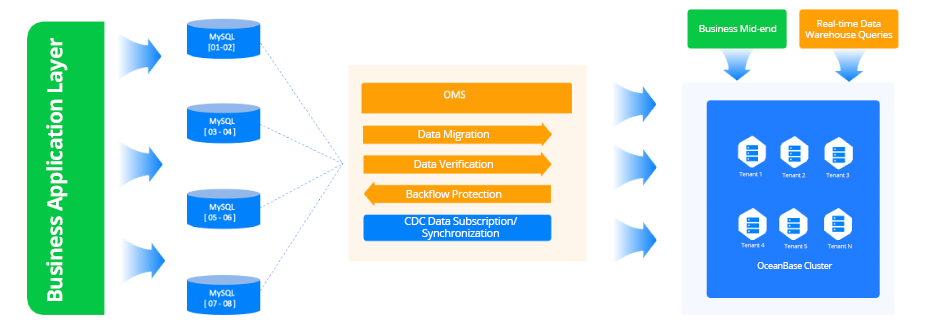
<style>
.page{position:relative;width:936px;height:324px;background:#ffffff}
.page>*{position:absolute;margin:0}
.t1{font:10px "OpenSans";letter-spacing:-0.03em;color:#ffffff}
.t2{font:10px/11px "OpenSans";letter-spacing:-0.03em;color:#ffffff}
.t3{font:21px "OpenSans-Bold";letter-spacing:-0.03em;color:#ffffff}
.t4{font:11px "OpenSans";letter-spacing:-0.03em;color:#ffffff}
.t5{font:6px "OpenSans";letter-spacing:-0.03em}
.t6{font:11px/12px "OpenSans";letter-spacing:-0.03em;color:#ffffff}
.t7{font:6px "OpenSans";letter-spacing:-0.03em;color:#ffffff}
.t8{font:9px "OpenSans";letter-spacing:-0.03em;color:#ffffff}
</style>
<div class="page">
<p class="t1" style="left:699px;top:25px;width:78px;height:7px">Business Mid-end</p>
<p class="t2" style="left:805px;top:20px;width:88px;height:20px;text-align:center">Real-time Data Warehouse Queries</p>
<p class="t3" style="left:46px;top:38px;width:22px;height:263px;rotate:-90deg">Business Application Layer</p>
<p class="t4" style="left:418px;top:130px;width:71px;height:11px">Data Migration</p>
<p class="t4" style="left:414px;top:160px;width:79px;height:8px">Data Verification</p>
<p class="t5" style="left:739px;top:172px;width:23px;height:5px">Tenant 1</p>
<p class="t5" style="left:782px;top:173px;width:24px;height:5px">Tenant 2</p>
<p class="t5" style="left:826px;top:173px;width:24px;height:5px">Tenant 3</p>
<p class="t4" style="left:406px;top:190px;width:96px;height:8px">Backflow Protection</p>
<p class="t6" style="left:404px;top:217px;width:114px;height:23px;text-align:center">CDC Data Subscription/<br>Synchronization</p>
<p class="t5" style="left:741px;top:243px;width:24px;height:5px">Tenant 4</p>
<p class="t5" style="left:784px;top:244px;width:24px;height:5px">Tenant 5</p>
<p class="t7" style="left:827px;top:244px;width:25px;height:5px">Tenant N</p>
<p class="t8" style="left:757px;top:262px;width:76px;height:7px">OceanBase Cluster</p>
</div>
